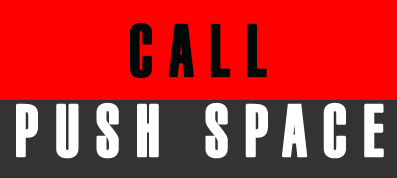
<style>
.page{position:relative;width:397px;height:178px;background:#ff0000}
.page>*{position:absolute;margin:0}
.t1{font:72px "MGRay";letter-spacing:0.2em;color:#010908;font-weight:bold}
.t2{font:72px "MGRay";letter-spacing:0.2em;color:#ffffff;font-weight:bold}
</style>
<div class="page">
<p class="t1" style="left:130px;top:22px;width:137px;height:57px">CALL</p>
<p class="t2" style="left:16px;top:102px;width:368px;height:57px">PUSH SPACE</p>
</div>
